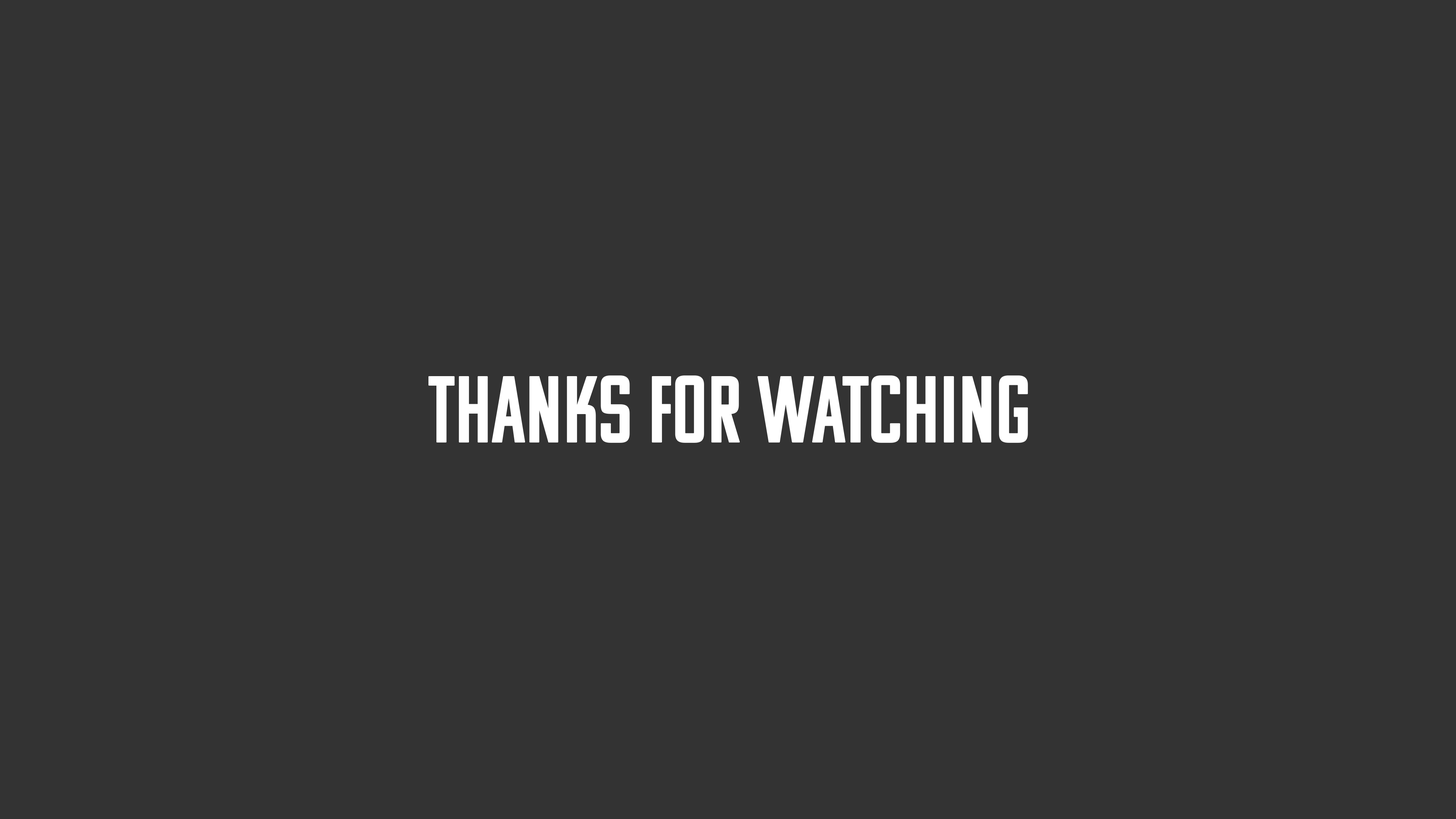
<style>
.page{position:relative;width:1456px;height:819px;background:#333333}
.page>*{position:absolute;margin:0}
.t1{font:94.8px "KomuA";color:#ffffff}
</style>
<div class="page">
<p class="t1" style="left:428px;top:375px;width:600px;height:68px">THANKS FOR WATCHING</p>
</div>
